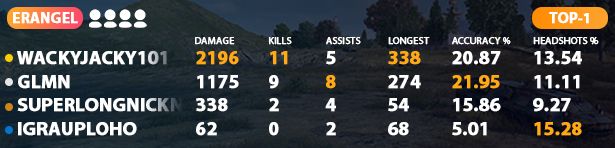
<style>
.page{position:relative;width:615px;height:148px}
.page>*{position:absolute;margin:0}
.t1{font:15px "MyriadPro-Bold";color:#ffffff;font-weight:bold}
.t2{font:10px "MyriadPro-Regular";color:#ffffff;font-weight:bold}
.t3{font:19px "MyriadPro-Bold";color:#ffffff;font-weight:bold}
.t4{font:19px "MyriadPro-Bold";color:#ffa914;font-weight:bold}
</style>
<div class="page">
<p class="t1" style="left:13px;top:12px;width:65px;height:12px">ERANGEL</p>
<p class="t1" style="left:549px;top:12px;width:40px;height:12px">TOP-1</p>
<p class="t2" style="left:195px;top:37px;width:40px;height:8px">DAMAGE</p>
<p class="t2" style="left:269px;top:37px;width:23px;height:8px">KILLS</p>
<p class="t2" style="left:326px;top:37px;width:35px;height:8px">ASSISTS</p>
<p class="t2" style="left:388px;top:37px;width:42px;height:8px">LONGEST</p>
<p class="t2" style="left:452px;top:37px;width:59px;height:8px">ACCURACY %</p>
<p class="t2" style="left:533px;top:37px;width:66px;height:8px">HEADSHOTS %</p>
<p class="t3" style="left:17px;top:51px;width:150px;height:14px">WACKYJACKY101</p>
<p class="t4" style="left:196px;top:51px;width:43px;height:14px">2196</p>
<p class="t4" style="left:270px;top:51px;width:18px;height:14px">11</p>
<p class="t3" style="left:326px;top:51px;width:10px;height:14px">5</p>
<p class="t4" style="left:388px;top:51px;width:33px;height:14px">338</p>
<p class="t3" style="left:452px;top:51px;width:49px;height:14px">20.87</p>
<p class="t3" style="left:534px;top:51px;width:48px;height:14px">13.54</p>
<p class="t3" style="left:18px;top:75px;width:52px;height:14px">GLMN</p>
<p class="t3" style="left:197px;top:75px;width:42px;height:14px">1175</p>
<p class="t3" style="left:269px;top:75px;width:10px;height:14px">9</p>
<p class="t4" style="left:326px;top:75px;width:10px;height:14px">8</p>
<p class="t3" style="left:388px;top:75px;width:33px;height:14px">274</p>
<p class="t4" style="left:452px;top:75px;width:48px;height:14px">21.95</p>
<p class="t3" style="left:534px;top:75px;width:46px;height:14px">11.11</p>
<p class="t3" style="left:17px;top:98px;width:206px;height:14px">SUPERLONGNICKNAME</p>
<p class="t3" style="left:196px;top:98px;width:32px;height:14px">338</p>
<p class="t3" style="left:269px;top:98px;width:10px;height:14px">2</p>
<p class="t3" style="left:325px;top:98px;width:11px;height:14px">4</p>
<p class="t3" style="left:388px;top:98px;width:21px;height:14px">54</p>
<p class="t3" style="left:453px;top:98px;width:48px;height:14px">15.86</p>
<p class="t3" style="left:533px;top:98px;width:38px;height:14px">9.27</p>
<p class="t3" style="left:18px;top:122px;width:119px;height:14px">IGRAUPLOHO</p>
<p class="t3" style="left:196px;top:122px;width:21px;height:14px">62</p>
<p class="t3" style="left:269px;top:122px;width:10px;height:14px">0</p>
<p class="t3" style="left:326px;top:122px;width:10px;height:14px">2</p>
<p class="t3" style="left:388px;top:122px;width:21px;height:14px">68</p>
<p class="t3" style="left:452px;top:122px;width:35px;height:14px">5.01</p>
<p class="t4" style="left:534px;top:122px;width:48px;height:14px">15.28</p>
</div>
